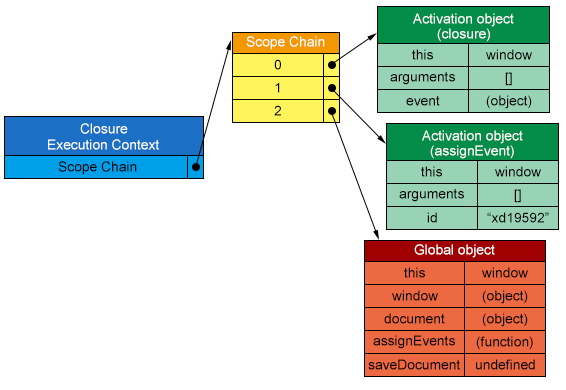
<style>
.page{position:relative;width:566px;height:390px;background:#ffffff}
.page>*{position:absolute;margin:0}
.t1{font:13.8px "ArialMT";color:#fffefe}
.t2{font:13.8px "ArialMT";color:#000000}
</style>
<div class="page">
<p class="t1" style="left:413px;top:13px;width:101px;height:14px">Activation object</p>
<p class="t1" style="left:437px;top:28px;width:53px;height:14px">(closure)</p>
<p class="t1" style="left:246px;top:36px;width:79px;height:14px">Scope Chain</p>
<p class="t2" style="left:412px;top:49px;width:21px;height:11px">this</p>
<p class="t2" style="left:486px;top:49px;width:46px;height:11px">window</p>
<p class="t2" style="left:274px;top:59px;width:7px;height:11px">0</p>
<p class="t2" style="left:390px;top:71px;width:65px;height:14px">arguments</p>
<p class="t2" style="left:505px;top:72px;width:7px;height:14px">[]</p>
<p class="t2" style="left:275px;top:82px;width:5px;height:11px">1</p>
<p class="t2" style="left:406px;top:95px;width:34px;height:11px">event</p>
<p class="t2" style="left:486px;top:95px;width:46px;height:14px">(object)</p>
<p class="t2" style="left:274px;top:105px;width:7px;height:11px">2</p>
<p class="t1" style="left:80px;top:123px;width:48px;height:11px">Closure</p>
<p class="t1" style="left:422px;top:130px;width:101px;height:14px">Activation object</p>
<p class="t1" style="left:48px;top:139px;width:111px;height:11px">Execution Context</p>
<p class="t1" style="left:430px;top:145px;width:84px;height:14px">(assignEvent)</p>
<p class="t2" style="left:58px;top:161px;width:79px;height:14px">Scope Chain</p>
<p class="t2" style="left:421px;top:166px;width:21px;height:11px">this</p>
<p class="t2" style="left:495px;top:166px;width:46px;height:11px">window</p>
<p class="t2" style="left:399px;top:188px;width:65px;height:14px">arguments</p>
<p class="t2" style="left:514px;top:189px;width:7px;height:14px">[]</p>
<p class="t2" style="left:427px;top:212px;width:10px;height:11px">id</p>
<p class="t2" style="left:487px;top:212px;width:62px;height:11px">“xd19592”</p>
<p class="t1" style="left:414px;top:244px;width:81px;height:14px">Global object</p>
<p class="t2" style="left:404px;top:267px;width:21px;height:11px">this</p>
<p class="t2" style="left:482px;top:267px;width:46px;height:11px">window</p>
<p class="t2" style="left:392px;top:290px;width:46px;height:11px">window</p>
<p class="t2" style="left:482px;top:290px;width:46px;height:14px">(object)</p>
<p class="t2" style="left:384px;top:313px;width:61px;height:11px">document</p>
<p class="t2" style="left:482px;top:313px;width:46px;height:14px">(object)</p>
<p class="t2" style="left:373px;top:335px;width:82px;height:14px">assignEvents</p>
<p class="t2" style="left:476px;top:336px;width:57px;height:14px">(function)</p>
<p class="t2" style="left:368px;top:359px;width:92px;height:11px">saveDocument</p>
<p class="t2" style="left:476px;top:359px;width:59px;height:11px">undefined</p>
</div>
